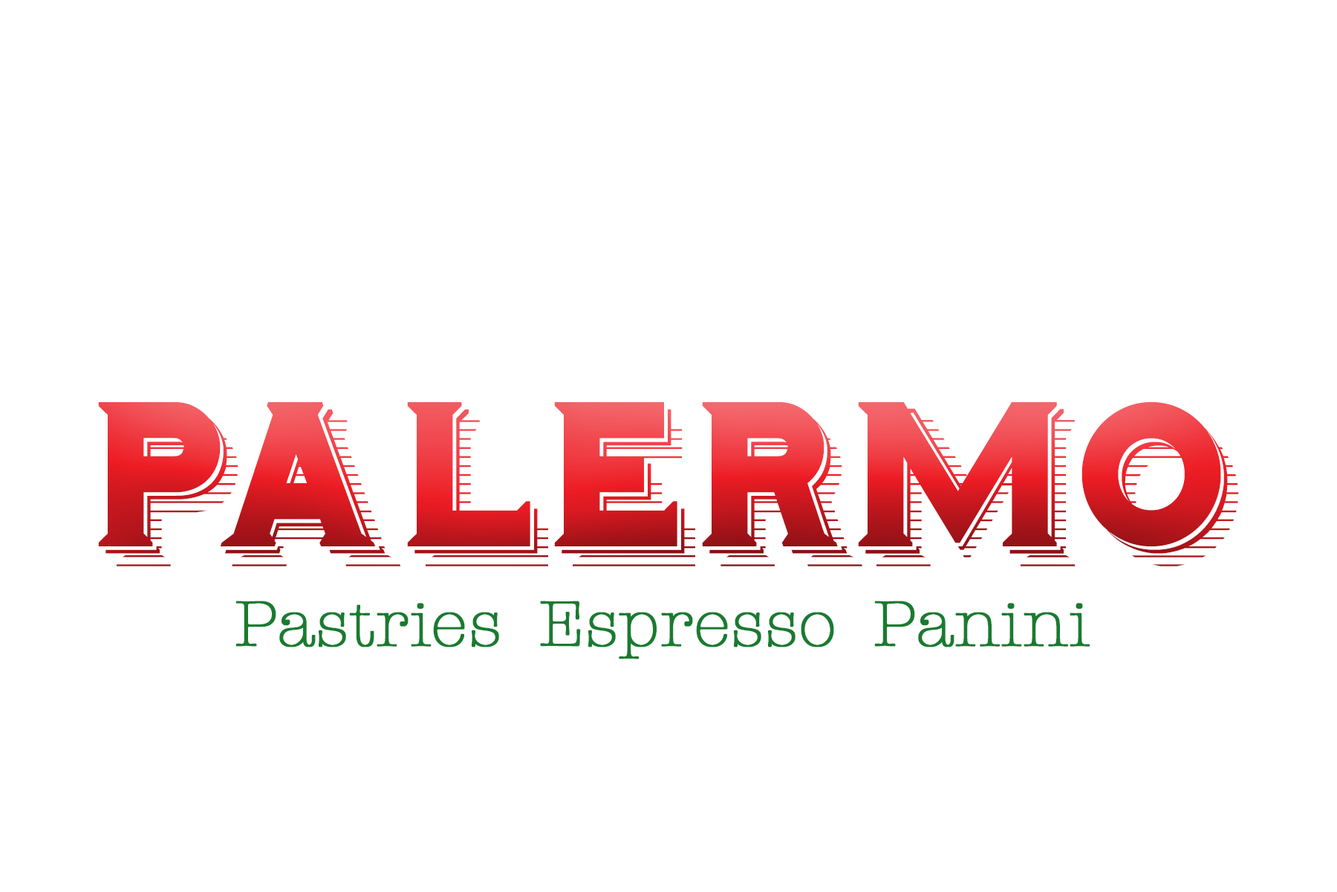
<style>
.page{position:relative;width:1337px;height:892px;background:#ffffff}
.page>*{position:absolute;margin:0}
.t1{font:180.3px "Hominis"}
.t2{font:66px "AmericanTypewriter-Light";color:#197b30;font-weight:bold}
</style>
<div class="page">
<p class="t1" style="left:98px;top:402px;width:1141px;height:164px">Palermo</p>
<p class="t2" style="left:236px;top:600px;width:855px;height:59px">Pastries  Espresso  Panini</p>
</div>
